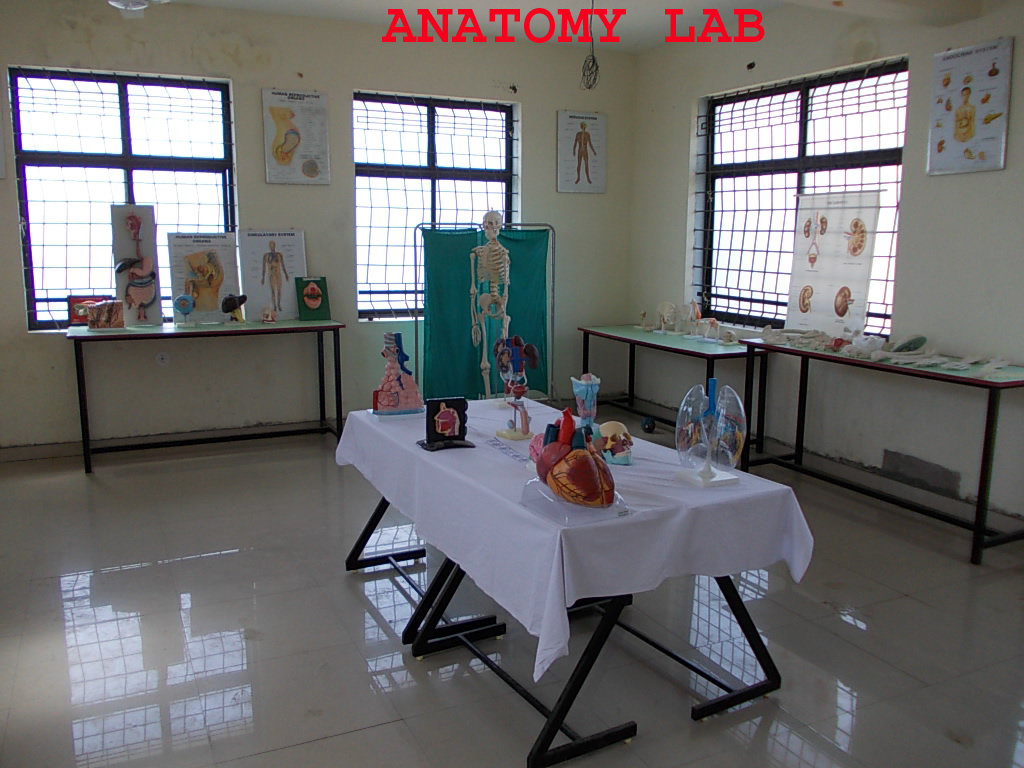
<style>
.page{position:relative;width:1024px;height:768px}
.page>*{position:absolute;margin:0}
.t1{font:58.3px "Courier-Bold";color:#f5011e}
</style>
<div class="page">
<p class="t1" style="left:382px;top:8px;width:383px;height:35px">ANATOMY LAB</p>
</div>
